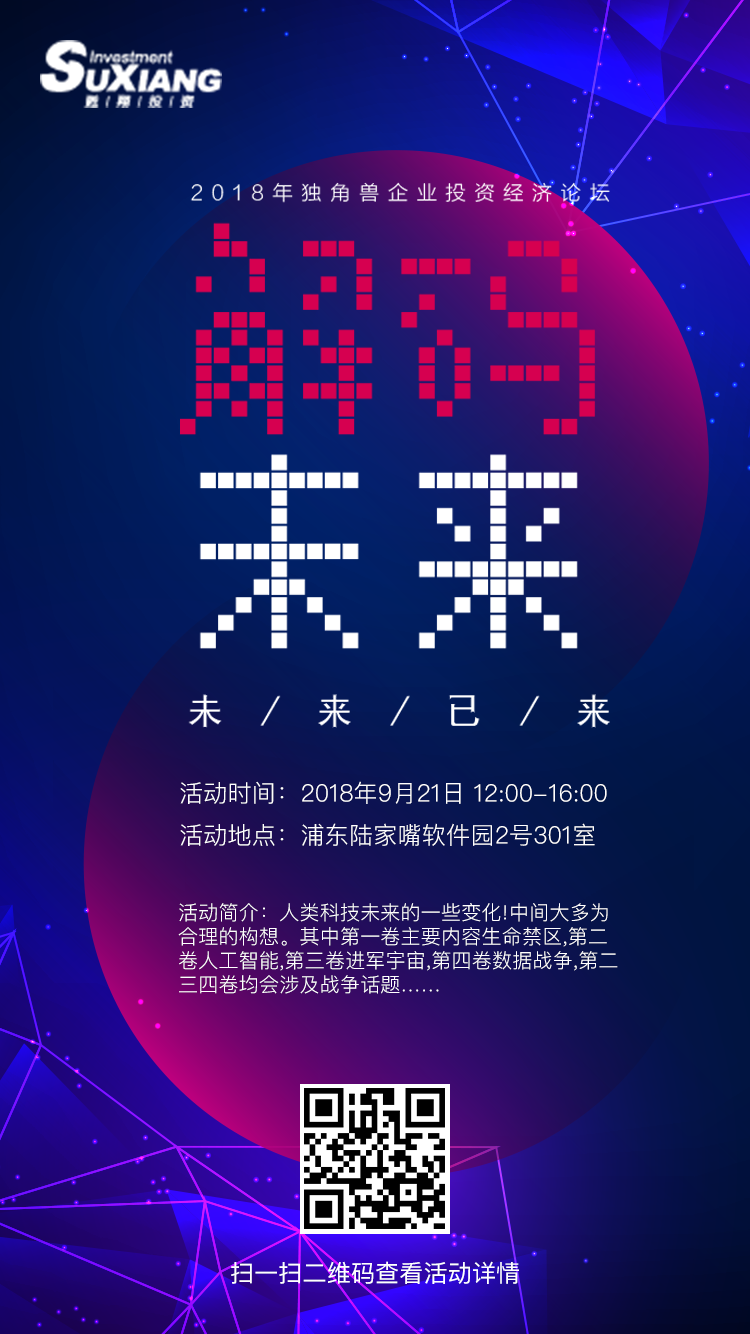
<style>
.page{position:relative;width:750px;height:1334px}
.page>*{position:absolute;margin:0}
.t1{font:24px "PingFangSC-Light";letter-spacing:0.012em;color:#ffffff}
.t2{font:20px "PingFangSC-Light";letter-spacing:0.012em;color:#ffffff}
.t3{font:24px "PingFangSC-Regular";letter-spacing:0.008em;color:#ffffff}
</style>
<div class="page">
<p class="t1" style="left:180px;top:781px;width:427px;height:23px">活动时间：2018年9月21日 12:00-16:00</p>
<p class="t1" style="left:180px;top:823px;width:415px;height:23px">活动地点：浦东陆家嘴软件园2号301室</p>
<p class="t2" style="left:178px;top:903px;width:440px;height:91px">活动简介：人类科技未来的一些变化!中间大多为<br>合理的构想。其中第一卷主要内容生命禁区,第二<br>卷人工智能,第三卷进军宇宙,第四卷数据战争,第二<br>三四卷均会涉及战争话题……</p>
<p class="t3" style="left:231px;top:1261px;width:288px;height:23px">扫一扫二维码查看活动详情</p>
</div>
